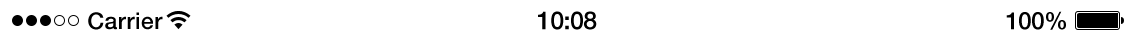
<style>
.page{position:relative;width:1136px;height:40px;background:#ffffff}
.page>*{position:absolute;margin:0}
.t1{font:23px "HelveticaNeue-Medium";letter-spacing:0.02em;color:#000000}
.t2{font:25px "HelveticaNeue-Medium";letter-spacing:-0.02em;color:#000000}
.t3{font:24px "HelveticaNeue-Medium";letter-spacing:-0.02em;color:#000000}
</style>
<div class="page">
<p class="t1" style="left:88px;top:12px;width:75px;height:18px">Carrier</p>
<p class="t1" style="left:88px;top:12px;width:75px;height:18px">Carrier</p>
<p class="t2" style="left:538px;top:11px;width:59px;height:19px">10.08</p>
<p class="t2" style="left:538px;top:11px;width:59px;height:19px">10:08</p>
<p class="t3" style="left:1006px;top:11px;width:60px;height:19px">100%</p>
<p class="t3" style="left:1006px;top:11px;width:60px;height:19px">100%</p>
</div>
